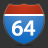
<style>
.page{position:relative;width:48px;height:48px;background:#333333}
.page>*{position:absolute;margin:0}
.t1{font:22.7px "MyriadPro-Semibold";color:#ffffff}
</style>
<div class="page">
<p class="t1" style="left:12px;top:20px;width:24px;height:16px">64</p>
</div>
